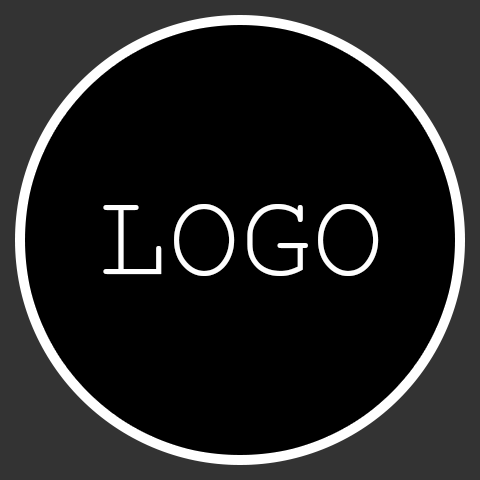
<style>
.page{position:relative;width:480px;height:480px;background:#000000}
.page>*{position:absolute;margin:0}
.t1{font:120px "CourierNewPSMT";color:#fefefe}
</style>
<div class="page">
<p class="t1" style="left:103px;top:204px;width:276px;height:72px">LOGO</p>
</div>
